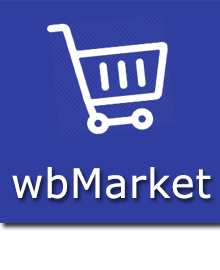
<style>
.page{position:relative;width:220px;height:270px;background:#303f9f}
.page>*{position:absolute;margin:0}
.t1{font:40.3px "Verdana";letter-spacing:0.025em;color:#ffffff}
</style>
<div class="page">
<p class="t1" style="left:12px;top:167px;width:199px;height:32px">wbMarket</p>
</div>
